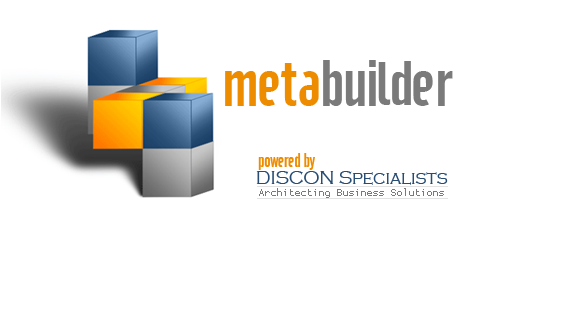
<style>
.page{position:relative;width:586px;height:325px;background:#ffffff}
.page>*{position:absolute;margin:0}
.t1{font:62.7px "Cafeta";letter-spacing:-0.02em;color:#7a7a7a;scale:1.07 1}
.t2{font:62.7px "Cafeta";letter-spacing:-0.02em;color:#ee8c00;scale:1.07 1}
.t3{font:19.8px "Cafeta";letter-spacing:-0.02em;color:#ee8c00;scale:0.9 1}
.t4{font:20.4px "CopperplateGothic-Light";color:#274d74;scale:0.87 1}
.t5{font:15px "ProggyTinyTTSZ";color:#7a7a7a}
</style>
<div class="page">
<p class="t1" style="left:225px;top:60px;width:228px;height:46px"><span class="t2">meta</span>builder</p>
<p class="t3" style="left:258px;top:153px;width:57px;height:17px">powered by</p>
<p class="t4" style="left:256px;top:171px;width:192px;height:14px">DISCON Specialists</p>
<p class="t5" style="left:259px;top:188px;width:185px;height:10px">Architecting Business Solutions</p>
</div>
